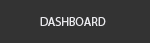
<style>
.page{position:relative;width:150px;height:43px;background:#333333}
.page>*{position:absolute;margin:0}
.t1{font:12px "MyriadPro-Regular";color:#e8e8ec}
</style>
<div class="page">
<p class="t1" style="left:40px;top:17px;width:66px;height:9px">DASHBOARD</p>
</div>
